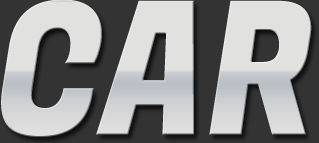
<style>
.page{position:relative;width:319px;height:143px;background:#333333}
.page>*{position:absolute;margin:0}
.t1{font:185.2px "FugazOne-Regular";color:#dfdfdf;scale:0.89 1}
</style>
<div class="page">
<p class="t1" style="left:1px;top:0px;width:311px;height:137px">CAR</p>
</div>
